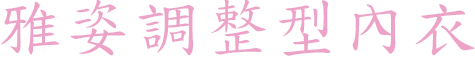
<style>
.page{position:relative;width:475px;height:57px;background:#ffffff}
.page>*{position:absolute;margin:0}
.t1{font:65.2px "DFKaiShu-SB-Estd-BF";letter-spacing:0.075em;color:#eda3c7}
</style>
<div class="page">
<p class="t1" style="left:0px;top:0px;width:475px;height:56px">雅姿調整型內衣</p>
</div>
